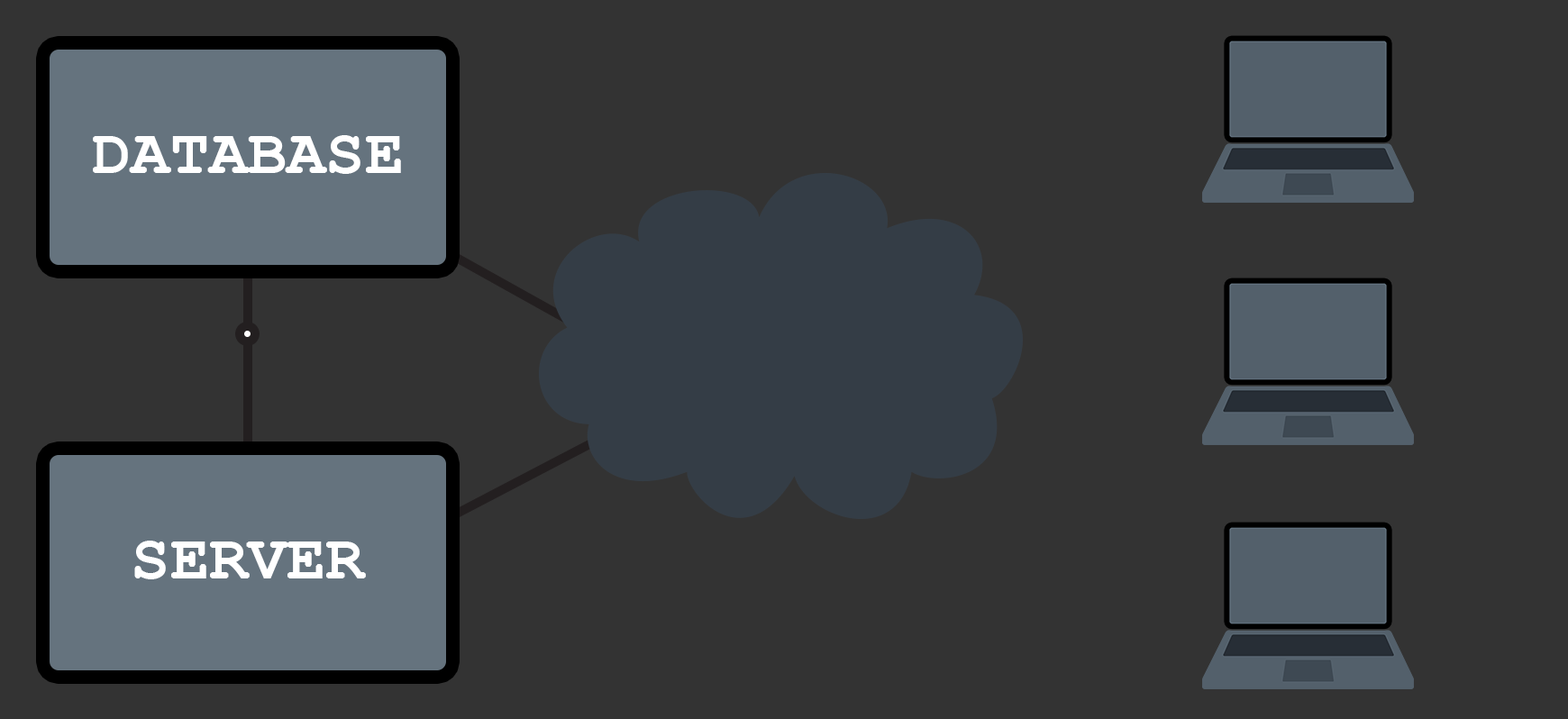
<style>
.page{position:relative;width:1568px;height:719px;background:#333333}
.page>*{position:absolute;margin:0}
.t1{font:64.9px "CourierNewPS-BoldMT";color:#ffffff}
</style>
<div class="page">
<p class="t1" style="left:93px;top:135px;width:308px;height:39px">DATABASE</p>
<p class="t1" style="left:134px;top:541px;width:232px;height:38px">SERVER</p>
</div>
